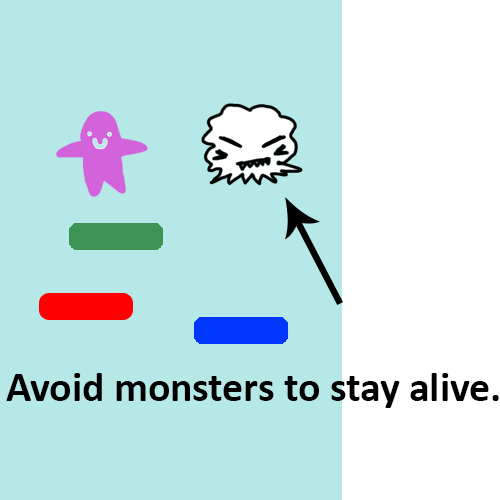
<style>
.page{position:relative;width:500px;height:500px;background:#b6e8e7}
.page>*{position:absolute;margin:0}
.t1{font:41.7px "Calibri-Bold";color:#000000}
</style>
<div class="page">
<p class="t1" style="left:6px;top:373px;width:493px;height:35px">Avoid monsters to stay alive.</p>
</div>
